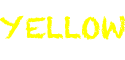
<style>
.page{position:relative;width:125px;height:60px;background:#ffffff}
.page>*{position:absolute;margin:0}
.t1{font:28px "Chalkduster";color:#ffff00}
</style>
<div class="page">
<p class="t1" style="left:0px;top:15px;width:125px;height:25px">YELLOW</p>
</div>
